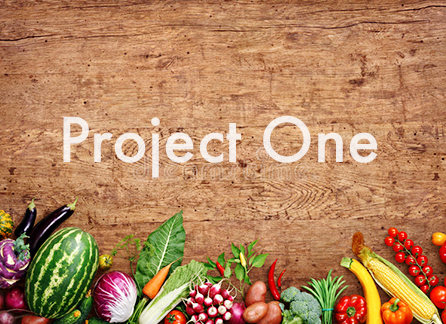
<style>
.page{position:relative;width:446px;height:324px}
.page>*{position:absolute;margin:0}
.t1{font:60px "Futura-Medium";color:#f6ede7}
</style>
<div class="page">
<p class="t1" style="left:63px;top:116px;width:315px;height:62px">Project One</p>
</div>
